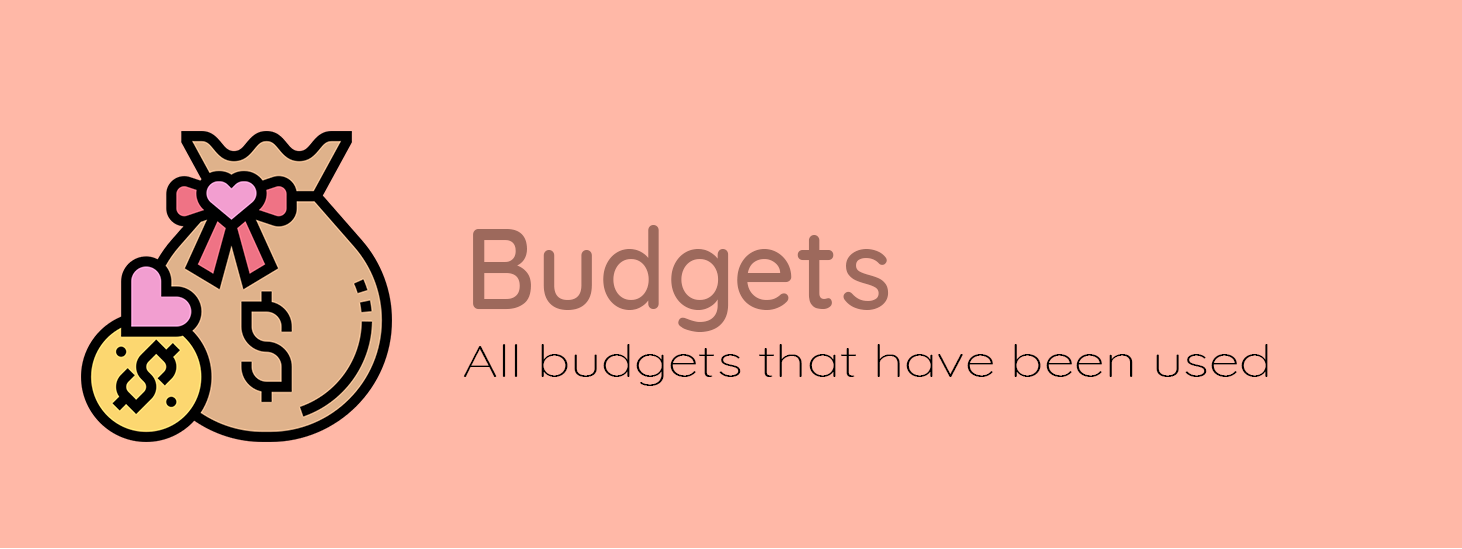
<style>
.page{position:relative;width:1462px;height:549px;background:#ffb8a7}
.page>*{position:absolute;margin:0}
.t1{font:113.5px "Quicksand-Medium";color:#9d695c;scale:0.97 1}
.t2{font:44.9px "Quicksand-Light";color:#000000;scale:1.24 1}
</style>
<div class="page">
<p class="t1" style="left:473px;top:225px;width:416px;height:107px">Budgets</p>
<p class="t2" style="left:463px;top:344px;width:805px;height:42px">All budgets that have been used</p>
</div>
